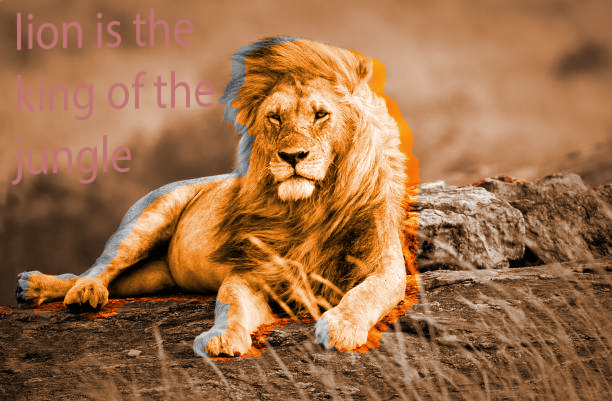
<style>
.page{position:relative;width:612px;height:401px}
.page>*{position:absolute;margin:0}
.t1{font:12.5px "MyriadPro-Regular";color:#c17272;scale:0.87 1}
</style>
<div class="page">
<p class="t1" style="left:11px;top:9px;width:203px;height:176px;rotate:-2deg">lion is the<br>king of the<br>jungle</p>
</div>
